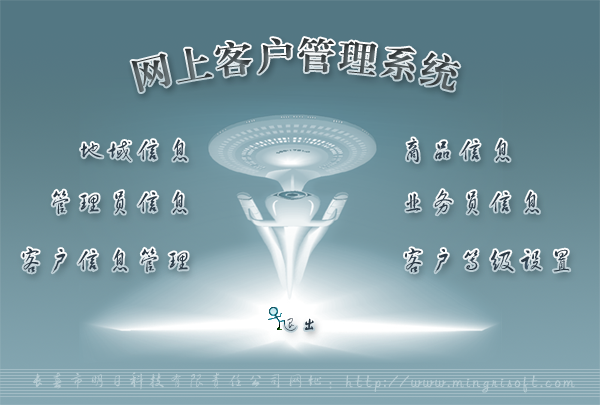
<style>
.page{position:relative;width:600px;height:405px}
.page>*{position:absolute;margin:0}
.t1{font:36px "FZXBSJW--GB1-0";letter-spacing:0.1em}
.t2{font:27px "FZHCJW--GB1-0";letter-spacing:0.1em;color:#2a3844}
.t3{font:27px "FZHCJW--GB1-0";letter-spacing:0.1em;color:#2b3a46}
.t4{font:18px "FZHCJW--GB1-0";letter-spacing:0.1em;color:#283642}
.t5{font:18px "FZHCJW--GB1-0";letter-spacing:0.1em;color:#b6cbd2}
</style>
<div class="page">
<p class="t1" style="left:131px;top:38px;width:329px;height:54px">网上客户管理系统</p>
<p class="t2" style="left:81px;top:139px;width:106px;height:22px">地域信息</p>
<p class="t3" style="left:407px;top:138px;width:103px;height:24px">商品信息</p>
<p class="t2" style="left:52px;top:190px;width:135px;height:24px">管理员信息</p>
<p class="t2" style="left:406px;top:190px;width:133px;height:25px">业务员信息</p>
<p class="t2" style="left:22px;top:248px;width:166px;height:25px">客户信息管理</p>
<p class="t2" style="left:405px;top:248px;width:165px;height:25px">客户等级设置</p>
<p class="t4" style="left:284px;top:318px;width:30px;height:13px">退出</p>
<p class="t5" style="left:33px;top:372px;width:542px;height:21px">长春市明日科技有限责任公司网址：http://www.mingrisoft.com</p>
</div>
